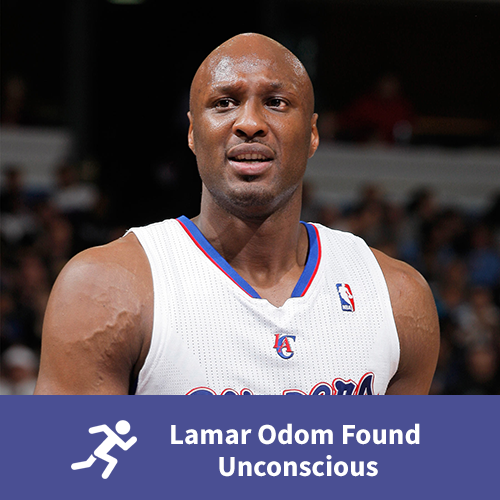
<style>
.page{position:relative;width:500px;height:500px}
.page>*{position:absolute;margin:0}
.t1{font:29px/32px "SourceSansPro-Bold";color:#ffffff}
</style>
<div class="page">
<p class="t1" style="left:171px;top:423px;width:249px;height:54px;text-align:center">Lamar Odom Found <br>Unconscious</p>
</div>
